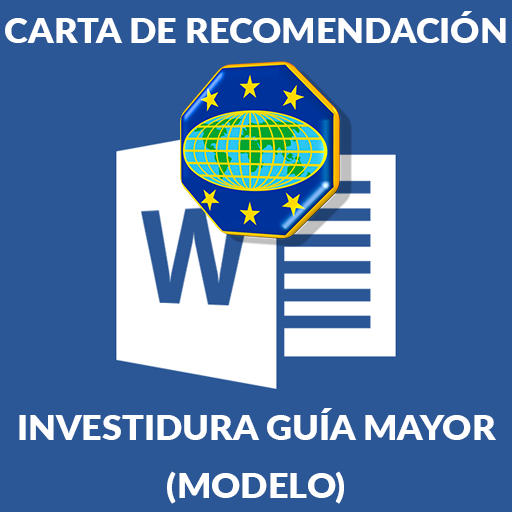
<style>
.page{position:relative;width:512px;height:512px;background:#2b5796}
.page>*{position:absolute;margin:0}
.t1{font:33.3px "Lato-Black";color:#ffffff;scale:1.08 1}
</style>
<div class="page">
<p class="t1" style="left:5px;top:11px;width:501px;height:32px">CARTA DE RECOMENDACIÓN</p>
<p class="t1" style="left:19px;top:408px;width:477px;height:32px">INVESTIDURA GUÍA MAYOR</p>
<p class="t1" style="left:167px;top:471px;width:177px;height:33px">(MODELO)</p>
</div>
